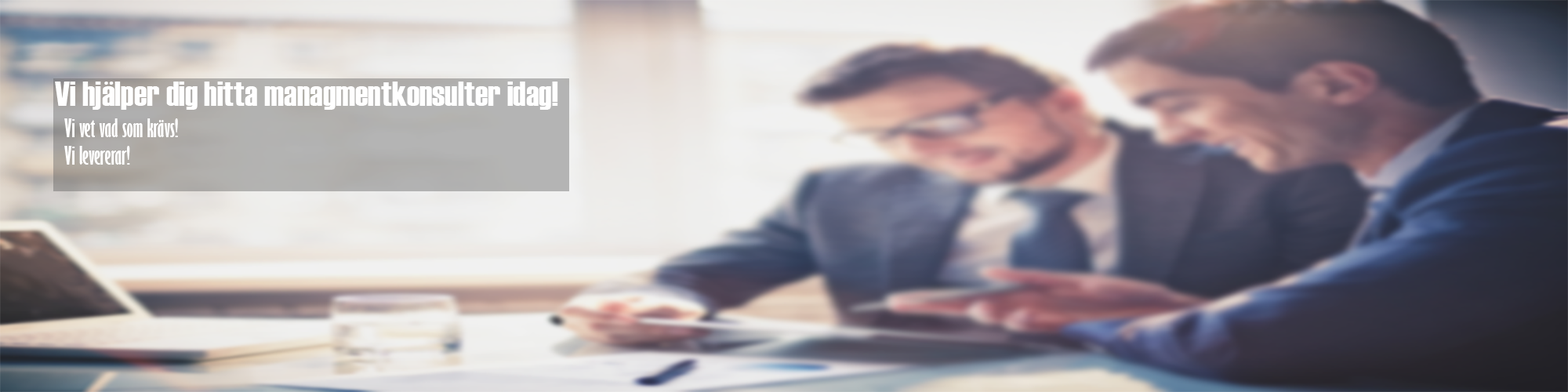
<style>
.page{position:relative;width:1568px;height:392px}
.page>*{position:absolute;margin:0}
.t1{font:8.3px "Haettenschweiler";color:#ffffff;scale:1.04 1}
.t2{font:23.2px "GillSansMT-ExtraCondensedBold";color:#ffffff;scale:1.04 1}
</style>
<div class="page">
<p class="t1" style="left:55px;top:82px;width:503px;height:28px">Vi hjälper dig hitta managmentkonsulter idag!</p>
<p class="t2" style="left:64px;top:118px;width:114px;height:47px">Vi vet vad som krävs!<br>Vi levererar!</p>
</div>
